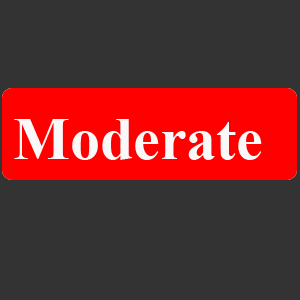
<style>
.page{position:relative;width:300px;height:300px;background:#333333}
.page>*{position:absolute;margin:0}
.t1{font:60px "TimesNewRomanPS-BoldMT";color:#faf8f8}
</style>
<div class="page">
<p class="t1" style="left:14px;top:119px;width:248px;height:41px">Moderate</p>
</div>
